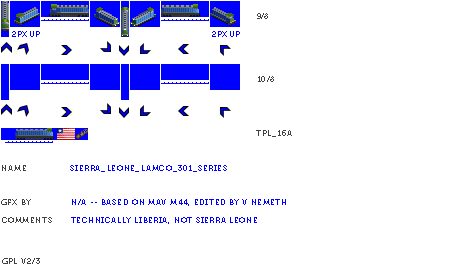
<style>
.page{position:relative;width:450px;height:280px;background:#ffffff}
.page>*{position:absolute;margin:0}
.t1{font:8px "Museo700-Regular";color:#404040}
.t2{font:8px "Museo700-Regular";color:#0000ff;text-transform:uppercase}
.t3{font:8px "Museo700-Regular";letter-spacing:0.075em;color:#404040}
.t4{font:8px "Museo700-Regular";letter-spacing:0.075em;color:#404040;text-transform:uppercase}
.t5{font:8px "Museo700-Regular";letter-spacing:0.075em;color:#0000ff;text-transform:uppercase}
</style>
<div class="page">
<p class="t1" style="left:257px;top:13px;width:11px;height:6px">9/8</p>
<p class="t2" style="left:12px;top:31px;width:28px;height:6px">2px up</p>
<p class="t2" style="left:212px;top:31px;width:28px;height:6px">2px up</p>
<p class="t3" style="left:258px;top:76px;width:16px;height:6px">10/8</p>
<p class="t4" style="left:256px;top:130px;width:36px;height:7px">tpl_16a</p>
<p class="t4" style="left:2px;top:165px;width:24px;height:6px">name</p>
<p class="t5" style="left:70px;top:165px;width:157px;height:7px">Sierra_Leone_LAMCO_301_Series</p>
<p class="t4" style="left:1px;top:199px;width:30px;height:6px">gfx by</p>
<p class="t5" style="left:72px;top:199px;width:214px;height:7px">n/a -- based on mav m44, edited by v nemeth</p>
<p class="t4" style="left:2px;top:217px;width:50px;height:6px">comments</p>
<p class="t5" style="left:71px;top:217px;width:186px;height:7px">technically liberia, not sierra leone</p>
<p class="t4" style="left:2px;top:258px;width:38px;height:6px">gpl v2/3</p>
</div>
